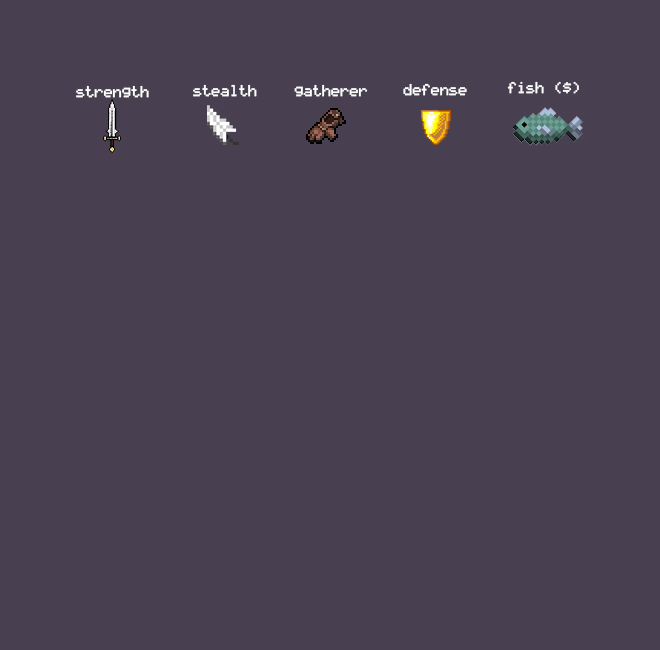
<style>
.page{position:relative;width:660px;height:650px;background:#484050}
.page>*{position:absolute;margin:0}
.t1{font:15px "LCDSolid";color:#ffffff}
</style>
<div class="page">
<p class="t1" style="left:76px;top:85px;width:73px;height:13px">strength</p>
<p class="t1" style="left:193px;top:84px;width:64px;height:13px">stealth</p>
<p class="t1" style="left:294px;top:84px;width:74px;height:13px">gatherer</p>
<p class="t1" style="left:403px;top:83px;width:64px;height:13px">defense</p>
<p class="t1" style="left:507px;top:81px;width:72px;height:13px">fish ($)</p>
</div>
